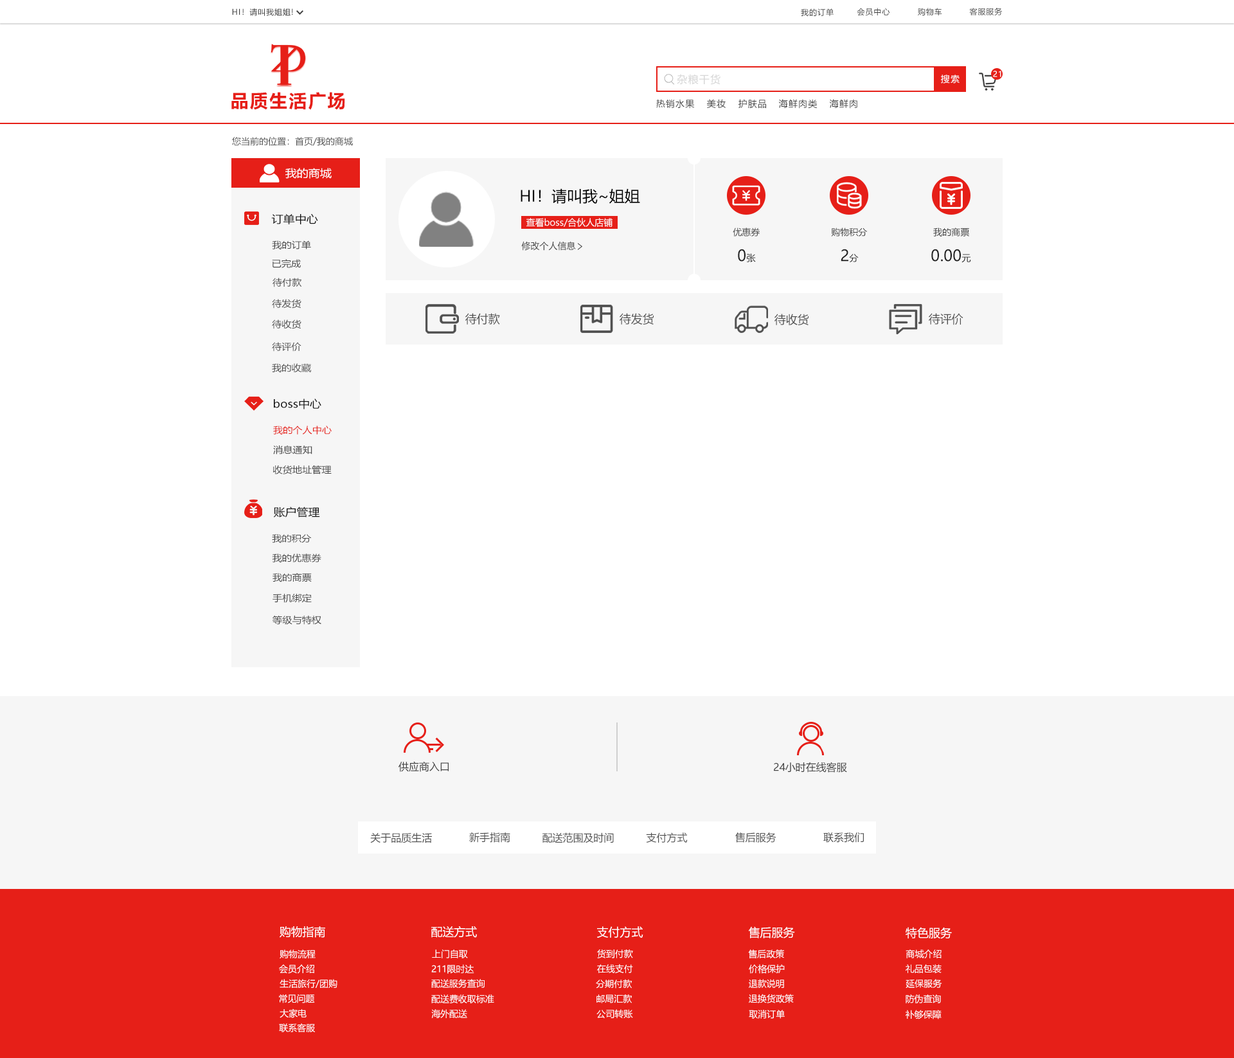
<style>
.page{position:relative;width:1234px;height:1058px;background:#ffffff}
.page>*{position:absolute;margin:0}
.t1{font:7.7px "MicrosoftYaHei";letter-spacing:0.08em;color:#404040}
.t2{font:10.3px "MicrosoftYaHei";letter-spacing:0.08em;color:#d6d6d6}
.t3{font:9px "MicrosoftYaHei";letter-spacing:0.08em;color:#ffffff}
.t4{font:7.7px "MicrosoftYaHei";letter-spacing:0.08em;color:#ffffff}
.t5{font:18px "MicrosoftYaHei-Bold";letter-spacing:0.08em;color:#e61f18}
.t6{font:9px "MicrosoftYaHei";letter-spacing:0.08em;color:#404040}
.t7{font:9px "MicrosoftYaHei";color:#505050}
.t8{font:10.6px "MicrosoftYaHei";color:#ffffff;scale:1.09 1}
.t9{font:15.4px "MicrosoftYaHei";color:#010101}
.t10{font:10.6px "MicrosoftYaHei";color:#101010;scale:1.09 1}
.t11{font:9px "MicrosoftYaHei";color:#ffffff}
.t12{font:9px "MicrosoftYaHei";color:#404040}
.t13{font:9px "MicrosoftYaHei";color:#484848;scale:1.09 1}
.t14{font:15.4px "MicrosoftYaHei";color:#202020}
.t15{font:9px "MicrosoftYaHei";color:#202020}
.t16{font:11.6px "MicrosoftYaHei";color:#505050}
.t17{font:9px "MicrosoftYaHei";color:#e61f18;scale:1.09 1}
.t18{font:10.3px "MicrosoftYaHei";color:#404040}
.t19{font:10.3px "MicrosoftYaHei";color:#505050}
.t20{font:11.6px "MicrosoftYaHei";color:#ffffff}
</style>
<div class="page">
<p class="t1" style="left:232px;top:8px;width:61px;height:8px">HI！请叫我姐姐!</p>
<p class="t1" style="left:801px;top:8px;width:33px;height:8px">我的订单</p>
<p class="t1" style="left:857px;top:8px;width:33px;height:8px">会员中心</p>
<p class="t1" style="left:918px;top:8px;width:24px;height:8px">购物车</p>
<p class="t1" style="left:969px;top:8px;width:34px;height:7px">客服服务</p>
<p class="t2" style="left:677px;top:74px;width:44px;height:11px">杂粮干货</p>
<p class="t3" style="left:941px;top:75px;width:19px;height:9px">搜索</p>
<p class="t4" style="left:993px;top:71px;width:9px;height:6px">21</p>
<p class="t5" style="left:231px;top:92px;width:114px;height:18px">品质生活广场</p>
<p class="t6" style="left:656px;top:99px;width:39px;height:10px">热销水果</p>
<p class="t6" style="left:707px;top:99px;width:19px;height:9px">美妆</p>
<p class="t6" style="left:739px;top:99px;width:27px;height:10px">护肤品</p>
<p class="t6" style="left:779px;top:99px;width:39px;height:10px">海鲜肉类</p>
<p class="t6" style="left:829px;top:99px;width:29px;height:10px">海鲜肉</p>
<p class="t7" style="left:232px;top:137px;width:121px;height:9px">您当前的位置：首页/我的商城</p>
<p class="t8" style="left:285px;top:168px;width:47px;height:11px">我的商城</p>
<p class="t9" style="left:521px;top:188px;width:119px;height:16px">HI！请叫我~姐姐</p>
<p class="t10" style="left:271px;top:213px;width:47px;height:11px">订单中心</p>
<p class="t11" style="left:526px;top:218px;width:87px;height:9px">查看boss/合伙人店铺</p>
<p class="t12" style="left:733px;top:228px;width:27px;height:9px">优惠券</p>
<p class="t12" style="left:831px;top:228px;width:37px;height:9px">购物积分</p>
<p class="t12" style="left:933px;top:228px;width:36px;height:9px">我的商票</p>
<p class="t13" style="left:272px;top:240px;width:39px;height:9px">我的订单</p>
<p class="t12" style="left:521px;top:241px;width:55px;height:10px">修改个人信息</p>
<p class="t14" style="left:738px;top:249px;width:18px;height:13px">0<span class="t15">张</span></p>
<p class="t14" style="left:841px;top:249px;width:18px;height:13px">2<span class="t15">分</span></p>
<p class="t14" style="left:932px;top:249px;width:39px;height:14px">0.00<span class="t15">元</span></p>
<p class="t13" style="left:272px;top:259px;width:29px;height:9px">已完成</p>
<p class="t13" style="left:273px;top:278px;width:29px;height:9px">待付款</p>
<p class="t13" style="left:272px;top:299px;width:30px;height:10px">待发货</p>
<p class="t16" style="left:465px;top:313px;width:35px;height:12px">待付款</p>
<p class="t16" style="left:620px;top:313px;width:34px;height:12px">待发货</p>
<p class="t16" style="left:775px;top:314px;width:34px;height:11px">待收货</p>
<p class="t16" style="left:929px;top:313px;width:35px;height:12px">待评价</p>
<p class="t13" style="left:272px;top:320px;width:30px;height:9px">待收货</p>
<p class="t13" style="left:272px;top:342px;width:30px;height:10px">待评价</p>
<p class="t13" style="left:272px;top:363px;width:39px;height:10px">我的收藏</p>
<p class="t10" style="left:274px;top:399px;width:47px;height:11px">boss中心</p>
<p class="t17" style="left:273px;top:426px;width:59px;height:9px">我的个人中心</p>
<p class="t13" style="left:273px;top:446px;width:39px;height:9px">消息通知</p>
<p class="t13" style="left:273px;top:465px;width:59px;height:9px">收货地址管理</p>
<p class="t10" style="left:273px;top:507px;width:47px;height:11px">账户管理</p>
<p class="t13" style="left:272px;top:534px;width:40px;height:9px">我的积分</p>
<p class="t13" style="left:272px;top:554px;width:49px;height:8px">我的优惠券</p>
<p class="t13" style="left:273px;top:573px;width:39px;height:9px">我的商票</p>
<p class="t13" style="left:273px;top:593px;width:39px;height:10px">手机绑定</p>
<p class="t13" style="left:273px;top:615px;width:48px;height:10px">等级与特权</p>
<p class="t18" style="left:399px;top:761px;width:50px;height:11px">供应商入口</p>
<p class="t18" style="left:774px;top:762px;width:73px;height:11px">24小时在线客服</p>
<p class="t19" style="left:370px;top:833px;width:62px;height:10px">关于品质生活</p>
<p class="t19" style="left:469px;top:832px;width:41px;height:11px">新手指南</p>
<p class="t19" style="left:543px;top:833px;width:71px;height:10px">配送范围及时间</p>
<p class="t19" style="left:646px;top:833px;width:42px;height:10px">支付方式</p>
<p class="t19" style="left:735px;top:833px;width:42px;height:10px">售后服务</p>
<p class="t19" style="left:824px;top:833px;width:40px;height:10px">联系我们</p>
<p class="t20" style="left:280px;top:926px;width:45px;height:12px">购物指南</p>
<p class="t20" style="left:431px;top:926px;width:46px;height:12px">配送方式</p>
<p class="t20" style="left:597px;top:926px;width:47px;height:12px">支付方式</p>
<p class="t20" style="left:748px;top:926px;width:47px;height:13px">售后服务</p>
<p class="t20" style="left:906px;top:927px;width:46px;height:12px">特色服务</p>
<p class="t11" style="left:280px;top:950px;width:36px;height:9px">购物流程</p>
<p class="t11" style="left:432px;top:950px;width:36px;height:9px">上门自取</p>
<p class="t11" style="left:597px;top:950px;width:36px;height:9px">货到付款</p>
<p class="t11" style="left:748px;top:950px;width:36px;height:9px">售后政策</p>
<p class="t11" style="left:906px;top:950px;width:36px;height:9px">商城介绍</p>
<p class="t11" style="left:279px;top:964px;width:35px;height:10px">会员介绍</p>
<p class="t11" style="left:431px;top:964px;width:43px;height:10px">211限时达</p>
<p class="t11" style="left:597px;top:964px;width:36px;height:9px">在线支付</p>
<p class="t11" style="left:749px;top:964px;width:36px;height:10px">价格保护</p>
<p class="t11" style="left:906px;top:964px;width:36px;height:9px">礼品包装</p>
<p class="t11" style="left:280px;top:979px;width:58px;height:9px">生活旅行/团购</p>
<p class="t11" style="left:431px;top:979px;width:54px;height:9px">配送服务查询</p>
<p class="t11" style="left:596px;top:979px;width:36px;height:10px">分期付款</p>
<p class="t11" style="left:749px;top:979px;width:35px;height:10px">退款说明</p>
<p class="t11" style="left:906px;top:979px;width:36px;height:9px">延保服务</p>
<p class="t11" style="left:279px;top:995px;width:36px;height:9px">常见问题</p>
<p class="t11" style="left:431px;top:995px;width:63px;height:9px">配送费收取标准</p>
<p class="t11" style="left:597px;top:995px;width:35px;height:9px">邮局汇款</p>
<p class="t11" style="left:749px;top:994px;width:45px;height:10px">退换货政策</p>
<p class="t11" style="left:906px;top:995px;width:35px;height:9px">防伪查询</p>
<p class="t11" style="left:280px;top:1009px;width:27px;height:9px">大家电</p>
<p class="t11" style="left:431px;top:1009px;width:36px;height:9px">海外配送</p>
<p class="t11" style="left:597px;top:1009px;width:36px;height:10px">公司转账</p>
<p class="t11" style="left:749px;top:1010px;width:36px;height:9px">取消订单</p>
<p class="t11" style="left:906px;top:1010px;width:36px;height:10px">补够保障</p>
<p class="t11" style="left:279px;top:1023px;width:36px;height:9px">联系客服</p>
</div>
